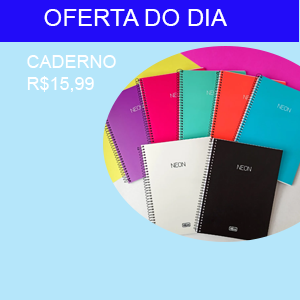
<style>
.page{position:relative;width:300px;height:300px;background:#b5e6fa}
.page>*{position:absolute;margin:0}
.t1{font:24px "ArialMT";color:#ffffff}
.t2{font:18px "ArialMT";color:#ffffff}
</style>
<div class="page">
<p class="t1" style="left:44px;top:9px;width:183px;height:17px">OFERTA DO DIA</p>
<p class="t2" style="left:27px;top:55px;width:89px;height:37px">CADERNO<br>R$15,99</p>
</div>
